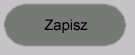
<style>
.page{position:relative;width:135px;height:55px;background:#767976}
.page>*{position:absolute;margin:0}
.t1{font:14.7px "ArialMT";color:#000000}
</style>
<div class="page">
<p class="t1" style="left:44px;top:19px;width:44px;height:14px">Zapisz</p>
</div>
